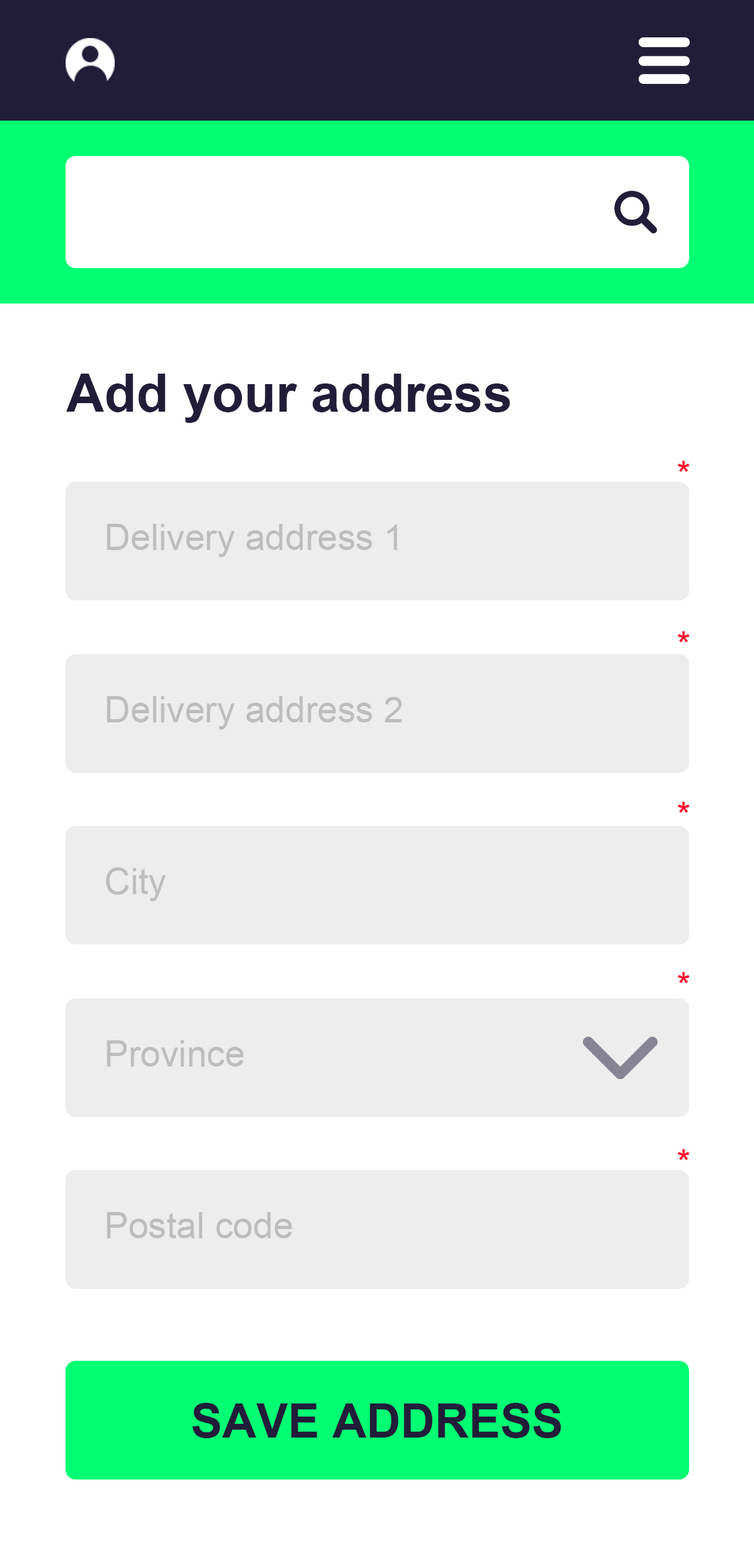
<style>
.page{position:relative;width:754px;height:1568px;background:#ffffff}
.page>*{position:absolute;margin:0}
.t1{font:52.4px "Arial-BoldMT";color:#211d39}
.t2{font:36.2px "ArialMT";color:#fe002a}
.t3{font:36.2px "ArialMT";color:#bdbdbd}
.t4{font:47.2px "Arial-BoldMT";color:#211d39}
</style>
<div class="page">
<p class="t1" style="left:66px;top:374px;width:444px;height:49px">Add your address</p>
<p class="t2" style="left:677px;top:461px;width:13px;height:11px">*</p>
<p class="t3" style="left:107px;top:524px;width:290px;height:33px">Delivery address 1</p>
<p class="t2" style="left:677px;top:631px;width:13px;height:11px">*</p>
<p class="t3" style="left:107px;top:696px;width:295px;height:34px">Delivery address 2</p>
<p class="t2" style="left:677px;top:802px;width:13px;height:11px">*</p>
<p class="t3" style="left:106px;top:867px;width:60px;height:34px">City</p>
<p class="t2" style="left:677px;top:972px;width:13px;height:11px">*</p>
<p class="t3" style="left:107px;top:1040px;width:137px;height:27px">Province</p>
<p class="t2" style="left:677px;top:1149px;width:13px;height:11px">*</p>
<p class="t3" style="left:107px;top:1212px;width:185px;height:26px">Postal code</p>
<p class="t4" style="left:192px;top:1403px;width:369px;height:35px">SAVE ADDRESS</p>
</div>
